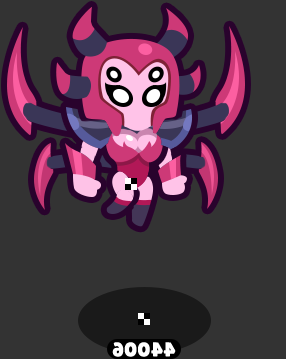
<style>
.page{position:relative;width:286px;height:359px;background:#333333}
.page>*{position:absolute;margin:0}
.t1{font:19.9px "LilitaOne";color:#ffffff;font-weight:bold}
</style>
<div class="page">
<p class="t1" style="left:112px;top:342px;width:64px;height:15px;rotate:180deg">44006</p>
</div>
